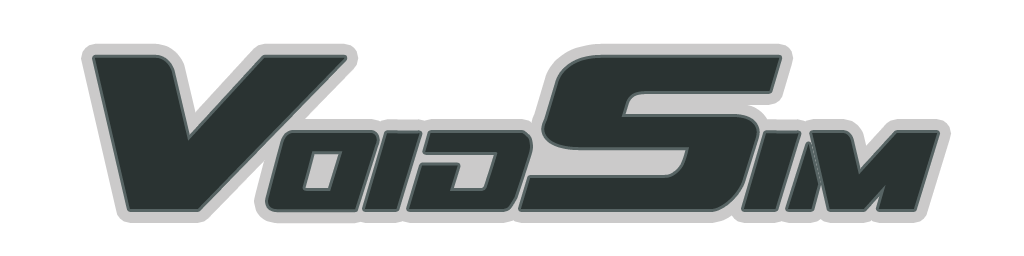
<style>
.page{position:relative;width:1024px;height:256px;background:#ffffff}
.page>*{position:absolute;margin:0}
.t1{font:108px "DreamMMA";color:#2a3332}
.t2{font:216.1px "DreamMMA";letter-spacing:-0.16em;color:#2a3332}
.t3{font:216.1px "DreamMMA";letter-spacing:-0.04em;color:#2a3332}
</style>
<div class="page">
<p class="t1" style="left:95px;top:57px;width:843px;height:153px">V<span class="t2">v</span>oid<span class="t3">s</span>im</p>
<p class="t1" style="left:95px;top:57px;width:843px;height:153px">V<span class="t2">v</span>oid<span class="t3">s</span>im</p>
</div>
